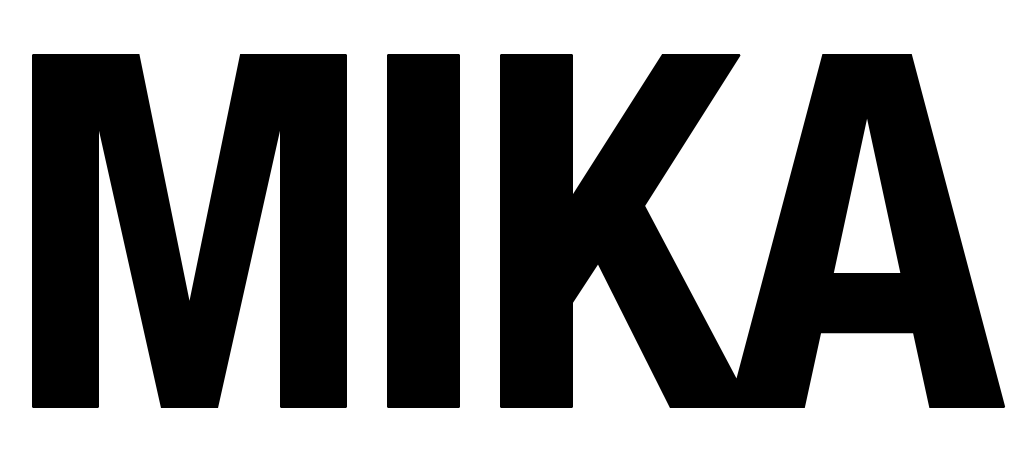
<style>
.page{position:relative;width:1024px;height:460px;background:#ffffff}
.page>*{position:absolute;margin:0}
.t1{font:493.1px "HelveticaNeueLTStd-BdCn";letter-spacing:-0.05em;color:#000000;font-weight:bold}
</style>
<div class="page">
<p class="t1" style="left:32px;top:54px;width:974px;height:354px">MIKA</p>
</div>
